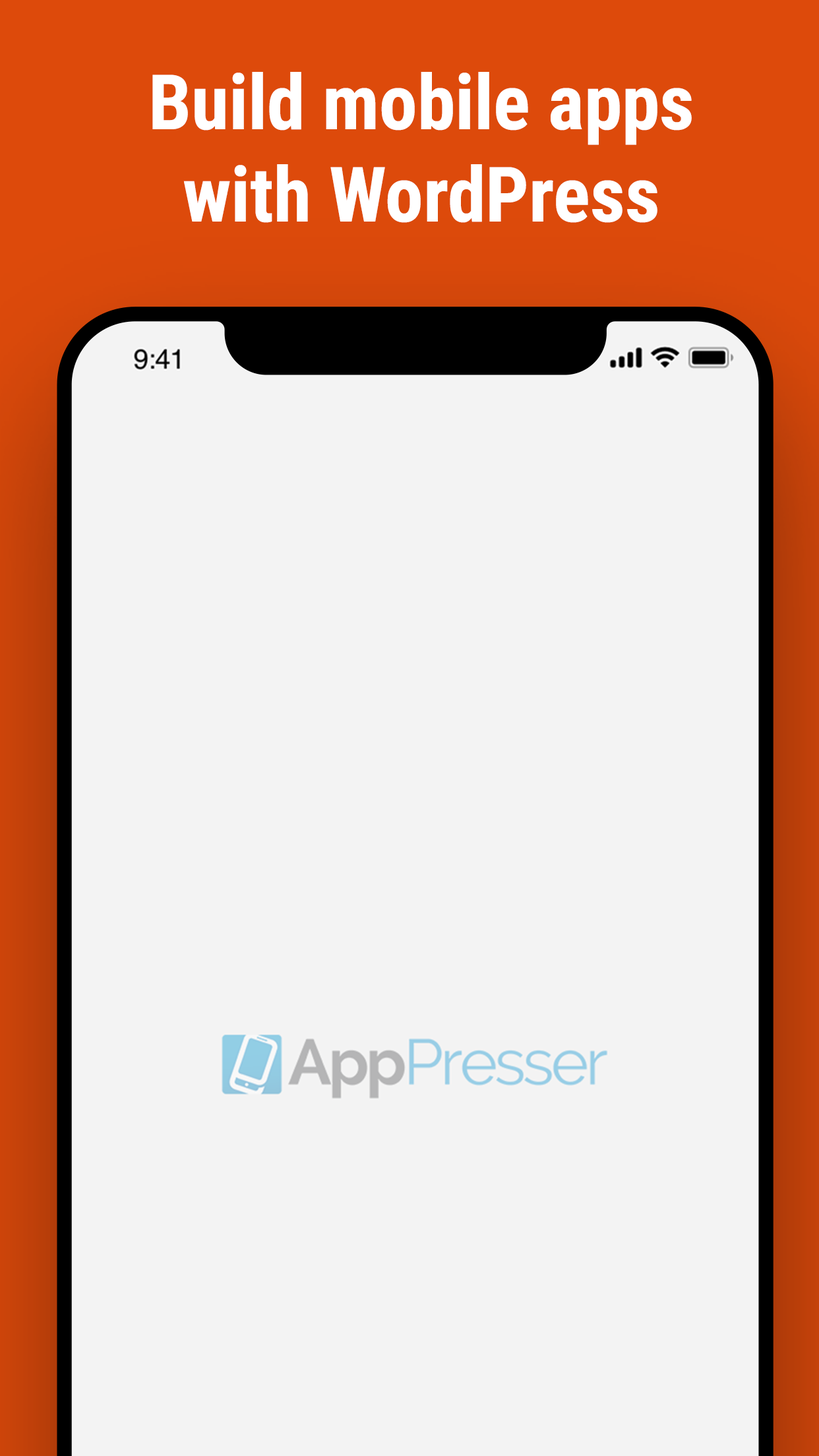
<style>
.page{position:relative;width:819px;height:1456px;background:#f3f3f3}
.page>*{position:absolute;margin:0}
.t1{font:76.5px "RobotoCondensed-Bold";color:#ffffff}
</style>
<div class="page">
<p class="t1" style="left:152px;top:72px;width:540px;height:151px;text-align:center">Build mobile apps with WordPress</p>
</div>
